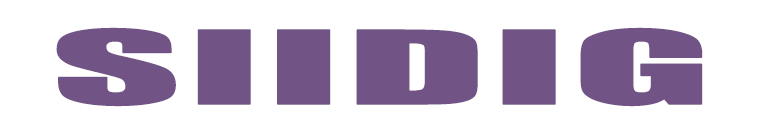
<style>
.page{position:relative;width:762px;height:129px;background:#ffffff}
.page>*{position:absolute;margin:0}
.t1{font:93.6px "Impact";color:#715386;font-variant:small-caps;font-weight:bold;scale:2.69 1}
</style>
<div class="page">
<p class="t1" style="left:56px;top:27px;width:647px;height:80px">SIIDIG</p>
</div>
